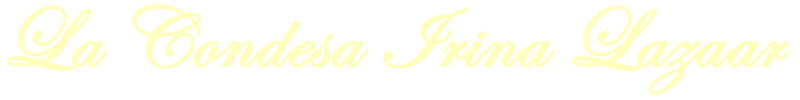
<style>
.page{position:relative;width:800px;height:100px;background:#ffffff}
.page>*{position:absolute;margin:0}
.t1{font:86.7px "EdwardianScriptITC";color:#ffffbb;font-weight:bold}
</style>
<div class="page">
<p class="t1" style="left:7px;top:4px;width:784px;height:91px">La Condesa Irina Lazaar</p>
</div>
